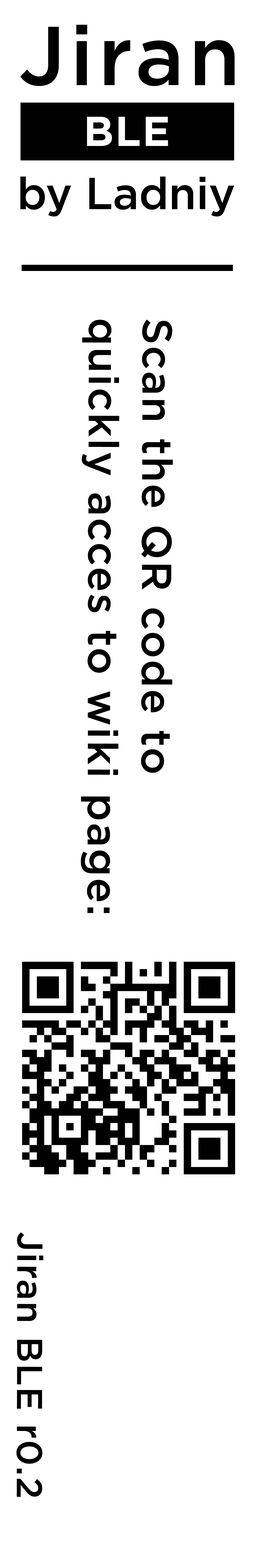
<style>
.page{position:relative;width:255px;height:1568px;background:#ffffff}
.page>*{position:absolute;margin:0}
.t1{font:83.4px "Gotham-Medium";letter-spacing:0.054em;color:#000000}
.t2{font:41.7px "Gotham-Bold";letter-spacing:0.033em;color:#ffffff}
.t3{font:44.7px "Gotham-Medium";letter-spacing:-0.005em;color:#000000}
.t4{font:41.7px/53.6px "Gotham-Medium";letter-spacing:0.033em;color:#010101}
.t5{font:35.7px "Gotham-Medium";letter-spacing:0.033em;color:#010101}
</style>
<div class="page">
<p class="t1" style="left:20px;top:25px;width:214px;height:61px">Jiran</p>
<p class="t2" style="left:87px;top:117px;width:81px;height:29px">BLE</p>
<p class="t3" style="left:20px;top:176px;width:214px;height:40px">by Ladniy</p>
<p class="t4" style="left:81px;top:320px;width:92px;height:593px;rotate:90deg">Scan the QR code to<br>quickly acces to wiki page:</p>
<p class="t5" style="left:16px;top:1232px;width:27px;height:265px;rotate:90deg">Jiran BLE r0.2</p>
</div>
